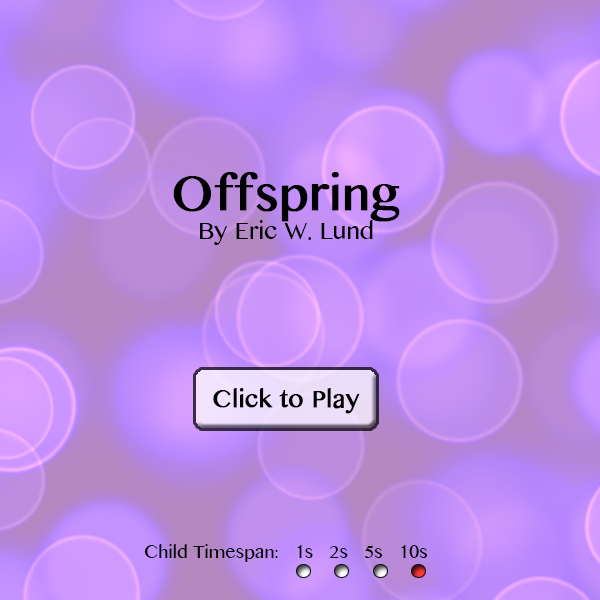
<style>
.page{position:relative;width:600px;height:600px}
.page>*{position:absolute;margin:0}
.t1{font:48px "LaoMN";color:#000000;font-weight:bold}
.t2{font:24px "LaoMN";color:#000000}
.t3{font:24px "LaoMN";color:#000000;font-weight:bold}
.t4{font:18px "LaoMN";color:#000000}
</style>
<div class="page">
<p class="t1" style="left:173px;top:172px;width:227px;height:50px">Offspring</p>
<p class="t2" style="left:200px;top:220px;width:173px;height:25px">By Eric W. Lund</p>
<p class="t3" style="left:213px;top:388px;width:147px;height:26px">Click to Play</p>
<p class="t4" style="left:144px;top:544px;width:284px;height:18px">Child Timespan:   1s   2s   5s   10s</p>
</div>
